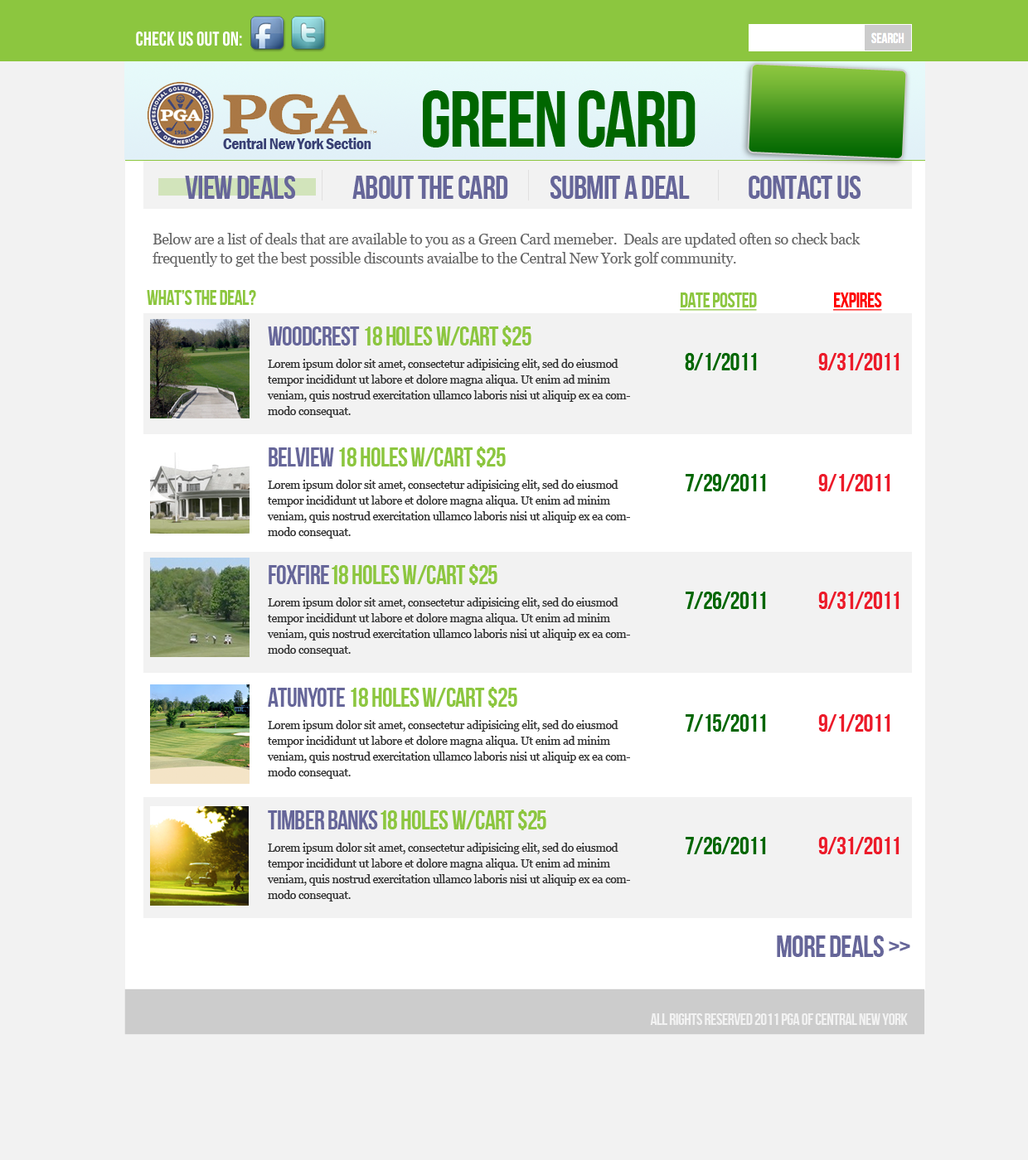
<style>
.page{position:relative;width:1028px;height:1160px;background:#f2f2f2}
.page>*{position:absolute;margin:0}
.t1{font:79.6px "BebasNeue";letter-spacing:-0.025em;color:#006600}
.t2{font:16.6px "FranklinGothic-DemiCond";letter-spacing:-0.025em;color:#383f73}
.t3{font:33.2px "BebasNeue";letter-spacing:-0.025em;color:#666699}
.t4{font:14.9px/19.1px "Georgia";letter-spacing:-0.025em;color:#666666}
.t5{font:20.7px "BebasNeue";letter-spacing:-0.025em;color:#8cc63f}
.t6{font:20.7px "BebasNeue";letter-spacing:-0.025em;color:#8cc63f;text-decoration:underline}
.t7{font:20.7px "BebasNeue";letter-spacing:-0.025em;color:#ff0000;text-decoration:underline}
.t8{font:26.5px "BebasNeue";letter-spacing:-0.025em;color:#8cc63f}
.t9{font:26.5px "BebasNeue";letter-spacing:-0.025em;color:#666699}
.t10{font:24.9px "BebasNeue";letter-spacing:-0.025em;color:#006600}
.t11{font:24.9px "BebasNeue";letter-spacing:-0.025em;color:#ec1a29}
.t12{font:11.6px/15.7px "Georgia";letter-spacing:-0.025em;color:#333333}
.t13{font:30.7px "BebasNeue";letter-spacing:-0.025em;color:#666699}
.t14{font:16.6px "BebasNeue";letter-spacing:-0.025em;color:#f2f2f2}
</style>
<div class="page">
<p class="t1" style="left:423px;top:90px;width:272px;height:58px">green card</p>
<p class="t2" style="left:223px;top:138px;width:148px;height:11px">Central New York Section</p>
<p class="t3" style="left:185px;top:176px;width:110px;height:23px">view deals</p>
<p class="t3" style="left:352px;top:176px;width:156px;height:23px">about the card</p>
<p class="t3" style="left:549px;top:176px;width:141px;height:23px">submit a deal</p>
<p class="t3" style="left:748px;top:176px;width:112px;height:23px">contact us</p>
<p class="t4" style="left:152px;top:233px;width:708px;height:34px">Below are a list of deals that are available to you as a Green Card memeber.  Deals are updated often so check back <br>frequently to get the best possible discounts avaialbe to the Central New York golf community.</p>
<p class="t5" style="left:147px;top:290px;width:109px;height:15px">what’s the deal?</p>
<p class="t6" style="left:680px;top:293px;width:77px;height:18px">date posted</p>
<p class="t7" style="left:833px;top:293px;width:49px;height:18px">expires</p>
<p class="t8" style="left:268px;top:326px;width:263px;height:20px"><span class="t9">woodcrest </span>18 holes w/cart $25</p>
<p class="t10" style="left:685px;top:353px;width:72px;height:17px">8/1/2011</p>
<p class="t11" style="left:818px;top:353px;width:81px;height:17px">9/31/2011</p>
<p class="t12" style="left:267px;top:359px;width:363px;height:59px">Lorem ipsum dolor sit amet, consectetur adipisicing elit, sed do eiusmod tempor incididunt ut labore et dolore magna aliqua. Ut enim ad minim veniam, quis nostrud exercitation ullamco laboris nisi ut aliquip ex ea commodo consequat.</p>
<p class="t8" style="left:269px;top:447px;width:237px;height:20px"><span class="t9">Belview </span>18 holes w/cart $25</p>
<p class="t12" style="left:267px;top:480px;width:363px;height:59px">Lorem ipsum dolor sit amet, consectetur adipisicing elit, sed do eiusmod tempor incididunt ut labore et dolore magna aliqua. Ut enim ad minim veniam, quis nostrud exercitation ullamco laboris nisi ut aliquip ex ea commodo consequat.</p>
<p class="t10" style="left:685px;top:474px;width:81px;height:17px">7/29/2011</p>
<p class="t11" style="left:818px;top:474px;width:72px;height:17px">9/1/2011</p>
<p class="t8" style="left:269px;top:564px;width:228px;height:21px"><span class="t9">foxfire</span>18 holes w/cart $25</p>
<p class="t10" style="left:685px;top:592px;width:81px;height:17px">7/26/2011</p>
<p class="t11" style="left:818px;top:592px;width:81px;height:17px">9/31/2011</p>
<p class="t12" style="left:267px;top:598px;width:363px;height:58px">Lorem ipsum dolor sit amet, consectetur adipisicing elit, sed do eiusmod tempor incididunt ut labore et dolore magna aliqua. Ut enim ad minim veniam, quis nostrud exercitation ullamco laboris nisi ut aliquip ex ea commodo consequat.</p>
<p class="t8" style="left:268px;top:687px;width:249px;height:21px"><span class="t9">atunyote </span>18 holes w/cart $25</p>
<p class="t12" style="left:267px;top:720px;width:363px;height:59px">Lorem ipsum dolor sit amet, consectetur adipisicing elit, sed do eiusmod tempor incididunt ut labore et dolore magna aliqua. Ut enim ad minim veniam, quis nostrud exercitation ullamco laboris nisi ut aliquip ex ea commodo consequat.</p>
<p class="t10" style="left:685px;top:714px;width:81px;height:18px">7/15/2011</p>
<p class="t11" style="left:818px;top:714px;width:72px;height:18px">9/1/2011</p>
<p class="t8" style="left:268px;top:810px;width:278px;height:20px"><span class="t9">timber banks</span>18 holes w/cart $25</p>
<p class="t12" style="left:267px;top:843px;width:363px;height:59px">Lorem ipsum dolor sit amet, consectetur adipisicing elit, sed do eiusmod tempor incididunt ut labore et dolore magna aliqua. Ut enim ad minim veniam, quis nostrud exercitation ullamco laboris nisi ut aliquip ex ea commodo consequat.</p>
<p class="t10" style="left:685px;top:837px;width:81px;height:17px">7/26/2011</p>
<p class="t11" style="left:818px;top:837px;width:81px;height:17px">9/31/2011</p>
<p class="t13" style="left:777px;top:936px;width:133px;height:21px">more deals &gt;&gt;</p>
<p class="t14" style="left:650px;top:1014px;width:258px;height:11px">all rights reserved 2011 pga of central new York</p>
</div>
